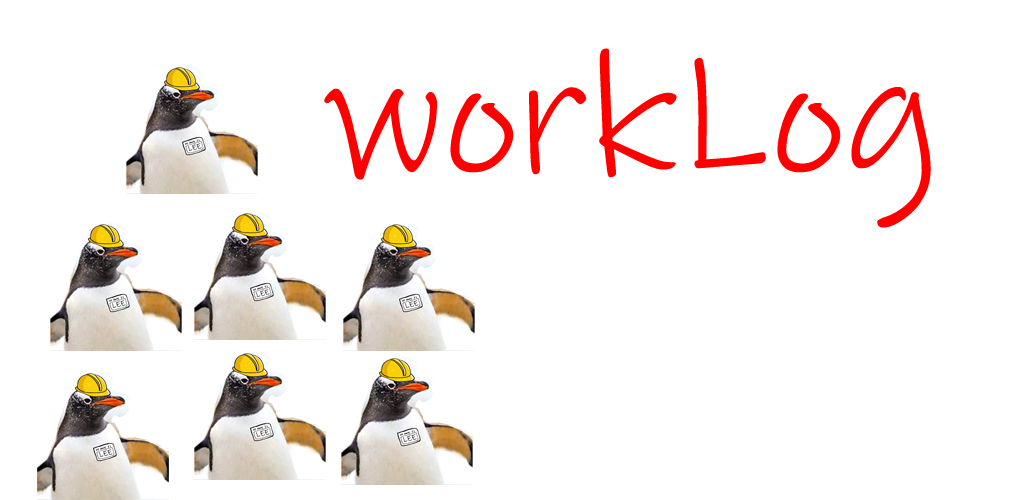
<style>
.page{position:relative;width:1024px;height:500px;background:#ffffff}
.page>*{position:absolute;margin:0}
.t1{font:172px "InkFree";color:#ff0000}
</style>
<div class="page">
<p class="t1" style="left:324px;top:48px;width:607px;height:180px">workLog</p>
</div>
